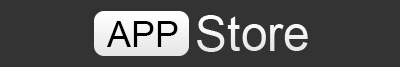
<style>
.page{position:relative;width:400px;height:67px;background:#333333}
.page>*{position:absolute;margin:0}
.t1{font:48px "ArialMT";color:#ffffff}
.t2{font:36px "ArialMT";color:#000000}
</style>
<div class="page">
<p class="t1" style="left:197px;top:15px;width:111px;height:37px">Store</p>
<p class="t2" style="left:107px;top:21px;width:71px;height:26px">APP</p>
</div>
